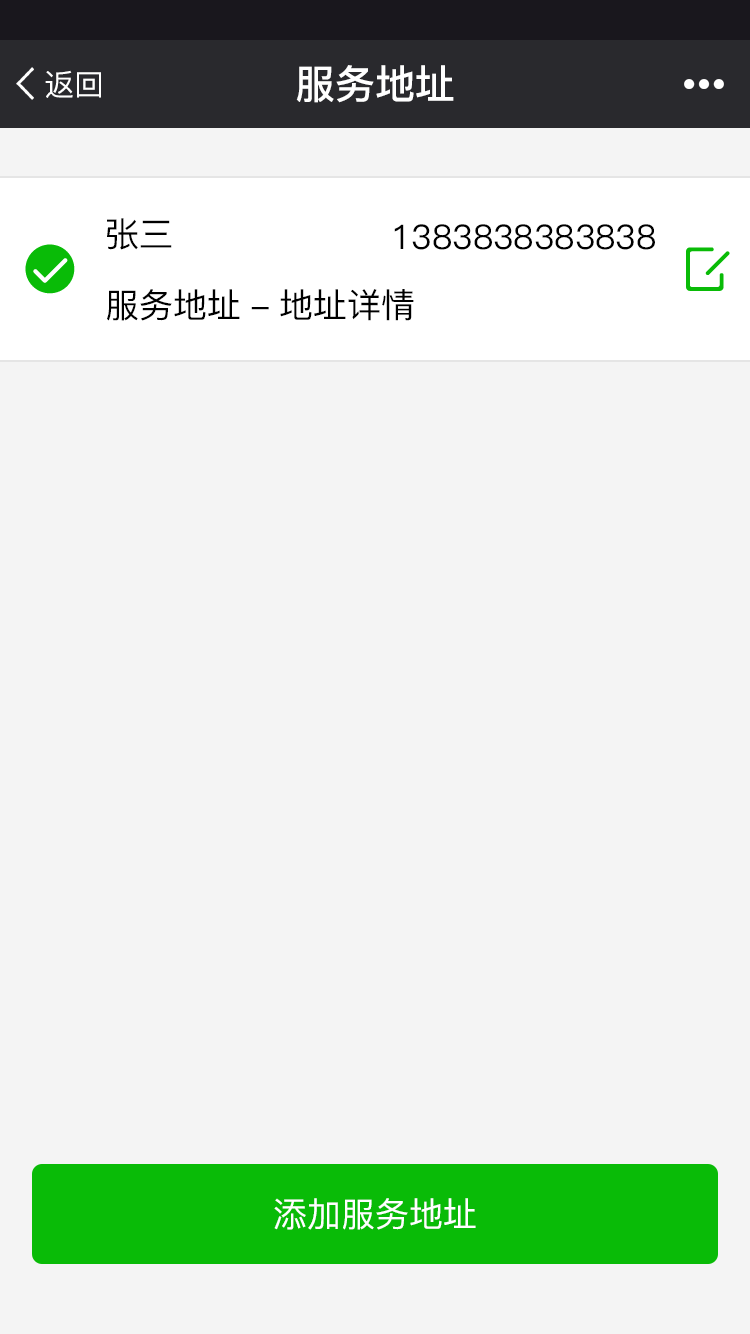
<style>
.page{position:relative;width:750px;height:1334px;background:#f4f4f4}
.page>*{position:absolute;margin:0}
.t1{font:40px "PingFangSC-Medium";color:#ffffff}
.t2{font:30px "PingFangSC";color:#ffffff}
.t3{font:34px "PingFangSC";color:#000000}
.t4{font:34px "PingFangSC";color:#ffffff}
</style>
<div class="page">
<p class="t1" style="left:296px;top:65px;width:158px;height:38px">服务地址</p>
<p class="t2" style="left:45px;top:70px;width:56px;height:28px">返回</p>
<p class="t3" style="left:107px;top:218px;width:65px;height:32px">张三</p>
<p class="t3" style="left:394px;top:224px;width:261px;height:26px">1383838383838</p>
<p class="t3" style="left:107px;top:289px;width:307px;height:32px">服务地址-地址详情</p>
<p class="t4" style="left:274px;top:1198px;width:202px;height:32px">添加服务地址</p>
</div>
